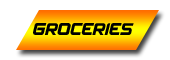
<style>
.page{position:relative;width:170px;height:60px;background:#ffffff}
.page>*{position:absolute;margin:0}
.t1{font:18px "Spantaran";color:#000000}
</style>
<div class="page">
<p class="t1" style="left:33px;top:23px;width:101px;height:12px">GROCERIES</p>
</div>
